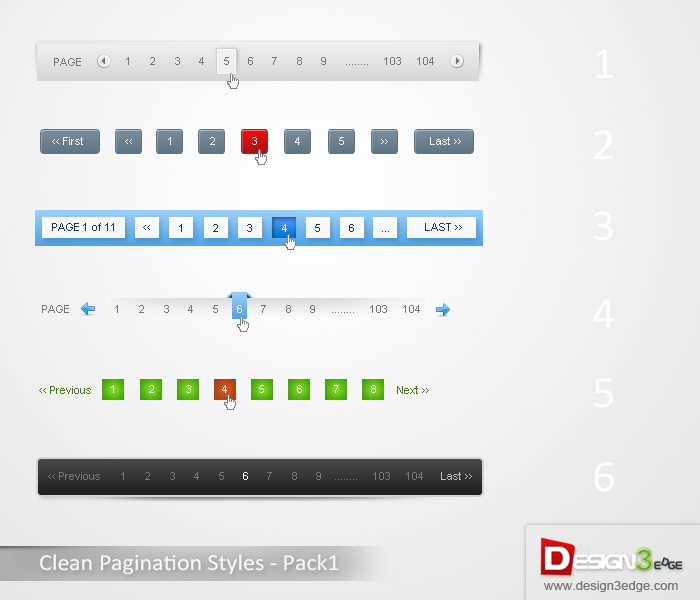
<style>
.page{position:relative;width:700px;height:600px}
.page>*{position:absolute;margin:0}
.t1{font:45.1px "Calibri";color:#ffffff;scale:1.04 1}
.t2{font:10.6px "ArialMT";color:#777777;scale:1.04 1}
.t3{font:10.6px "ArialMT";letter-spacing:0.7em;color:#777777;scale:1.04 1}
.t4{font:10.6px "ArialMT";color:#ffffff;scale:1.04 1}
.t5{font:10.6px "ComicSansMS";color:#ffffff;scale:1.04 1}
.t6{font:10.6px "ArialMT";color:#12396b;scale:1.04 1}
.t7{font:10.6px "ComicSansMS";color:#12396b;scale:1.04 1}
.t8{font:10.6px "ArialMT";letter-spacing:0.7em;color:#ffffff;scale:1.04 1}
.t9{font:10.6px "ArialMT";color:#3a820b;scale:1.04 1}
.t10{font:10.6px "ComicSansMS";color:#3a820b;scale:1.04 1}
.t11{font:10.6px "ArialMT";color:#fffefe;scale:1.04 1}
.t12{font:10.6px "ComicSansMS";color:#777777;scale:1.04 1}
.t13{font:10.6px "ArialMT";color:#bbbbbb;scale:1.04 1}
.t14{font:10.6px "ComicSansMS";color:#bbbbbb;scale:1.04 1}
.t15{font:23px "Calibri";color:#f8f8f8;scale:1.04 1}
.t16{font:12.5px "ArialMT";color:#777777;scale:1.04 1}
</style>
<div class="page">
<p class="t1" style="left:596px;top:49px;width:18px;height:29px">1</p>
<p class="t2" style="left:54px;top:58px;width:27px;height:8px">PAGE</p>
<p class="t3" style="left:126px;top:57px;width:200px;height:8px">1 2 3 4 5 6 7 8 9</p>
<p class="t2" style="left:346px;top:57px;width:88px;height:8px">........     103     104</p>
<p class="t4" style="left:52px;top:137px;width:31px;height:8px"><span class="t5">&lt;&lt; </span>First</p>
<p class="t4" style="left:168px;top:137px;width:3px;height:8px">1</p>
<p class="t4" style="left:210px;top:137px;width:5px;height:8px">2</p>
<p class="t4" style="left:252px;top:137px;width:5px;height:8px">3</p>
<p class="t4" style="left:295px;top:137px;width:5px;height:8px">4</p>
<p class="t4" style="left:339px;top:137px;width:5px;height:8px">5</p>
<p class="t4" style="left:430px;top:137px;width:31px;height:8px">Last <span class="t5">&gt;&gt;</span></p>
<p class="t1" style="left:594px;top:130px;width:20px;height:29px">2</p>
<p class="t5" style="left:125px;top:139px;width:7px;height:5px">&lt;&lt;</p>
<p class="t5" style="left:381px;top:139px;width:7px;height:5px">&gt;&gt;</p>
<p class="t1" style="left:594px;top:211px;width:19px;height:30px">3</p>
<p class="t6" style="left:52px;top:223px;width:62px;height:8px">PAGE 1 of 11</p>
<p class="t7" style="left:143px;top:225px;width:7px;height:5px">&lt;&lt;</p>
<p class="t6" style="left:179px;top:224px;width:3px;height:8px">1</p>
<p class="t6" style="left:213px;top:224px;width:5px;height:8px">2</p>
<p class="t6" style="left:247px;top:224px;width:5px;height:8px">3</p>
<p class="t4" style="left:282px;top:224px;width:5px;height:8px">4</p>
<p class="t6" style="left:315px;top:224px;width:5px;height:8px">5</p>
<p class="t6" style="left:349px;top:224px;width:5px;height:8px">6</p>
<p class="t6" style="left:382px;top:231px;width:7px;height:1px">...</p>
<p class="t6" style="left:425px;top:223px;width:37px;height:8px">LAST <span class="t7">&gt;&gt;</span></p>
<p class="t2" style="left:42px;top:305px;width:27px;height:8px">PAGE</p>
<p class="t3" style="left:115px;top:305px;width:200px;height:8px">1 2 3 4 5 <span class="t8">6 </span>7 8 9</p>
<p class="t2" style="left:332px;top:305px;width:88px;height:8px">........     103     104</p>
<p class="t1" style="left:593px;top:299px;width:22px;height:30px">4</p>
<p class="t9" style="left:39px;top:386px;width:52px;height:8px"><span class="t10">&lt;&lt;</span> Previous</p>
<p class="t11" style="left:111px;top:385px;width:3px;height:8px">1</p>
<p class="t11" style="left:149px;top:385px;width:5px;height:8px">2</p>
<p class="t11" style="left:186px;top:385px;width:5px;height:8px">3</p>
<p class="t11" style="left:222px;top:385px;width:5px;height:8px">4</p>
<p class="t11" style="left:259px;top:385px;width:5px;height:8px">5</p>
<p class="t11" style="left:297px;top:385px;width:5px;height:8px">6</p>
<p class="t11" style="left:334px;top:385px;width:5px;height:8px">7</p>
<p class="t11" style="left:371px;top:385px;width:5px;height:8px">8</p>
<p class="t9" style="left:397px;top:386px;width:32px;height:8px">Next <span class="t10">&gt;&gt;</span></p>
<p class="t1" style="left:594px;top:378px;width:19px;height:30px">5</p>
<p class="t1" style="left:594px;top:462px;width:20px;height:30px">6</p>
<p class="t2" style="left:48px;top:472px;width:52px;height:8px"><span class="t12">&lt;&lt; </span>Previous</p>
<p class="t3" style="left:121px;top:472px;width:200px;height:8px">1 2 3 4 5 <span class="t8">6 </span>7 8 9</p>
<p class="t2" style="left:335px;top:472px;width:88px;height:8px">........     103     104</p>
<p class="t13" style="left:441px;top:472px;width:31px;height:8px">Last<span class="t14"> &gt;&gt;</span></p>
<p class="t15" style="left:40px;top:554px;width:299px;height:21px">Clean Pagination Styles - Pack1</p>
<p class="t16" style="left:544px;top:581px;width:134px;height:11px">www.design3edge.com</p>
</div>
